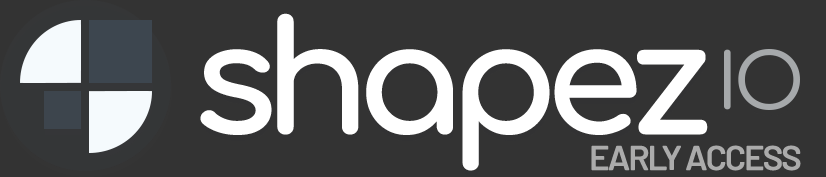
<style>
.page{position:relative;width:826px;height:177px;background:#333333}
.page>*{position:absolute;margin:0}
.t1{font:154.1px "Comfortaa-Bold";letter-spacing:-0.09em;color:#ffffff}
.t2{font:34.3px "Barlow-SemiBold";letter-spacing:-0.06em;color:#ababab}
.t3{font:34.3px "Barlow-SemiBold";letter-spacing:-0.18em;color:#ababab}
</style>
<div class="page">
<p class="t1" style="left:200px;top:13px;width:508px;height:158px">shapez</p>
<p class="t2" style="left:591px;top:145px;width:210px;height:26px">EAR<span class="t3">L</span>Y ACCESS</p>
</div>
